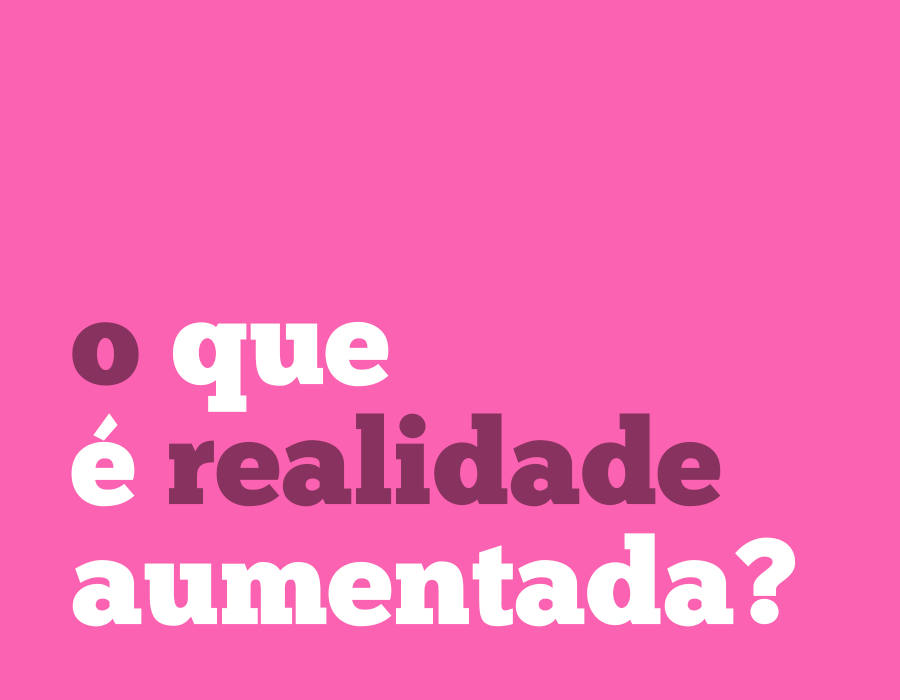
<style>
.page{position:relative;width:900px;height:700px;background:#fc62b2}
.page>*{position:absolute;margin:0}
.t1{font:120.7px/120px "ChunkFive-Roman";color:#ffffff}
.t2{font:120.7px/120px "ChunkFive-Roman";color:#88335f}
</style>
<div class="page">
<p class="t1" style="left:71px;top:321px;width:725px;height:306px"><span class="t2">o </span>que<br>é <span class="t2">realidade<br></span>aumentada?</p>
</div>
